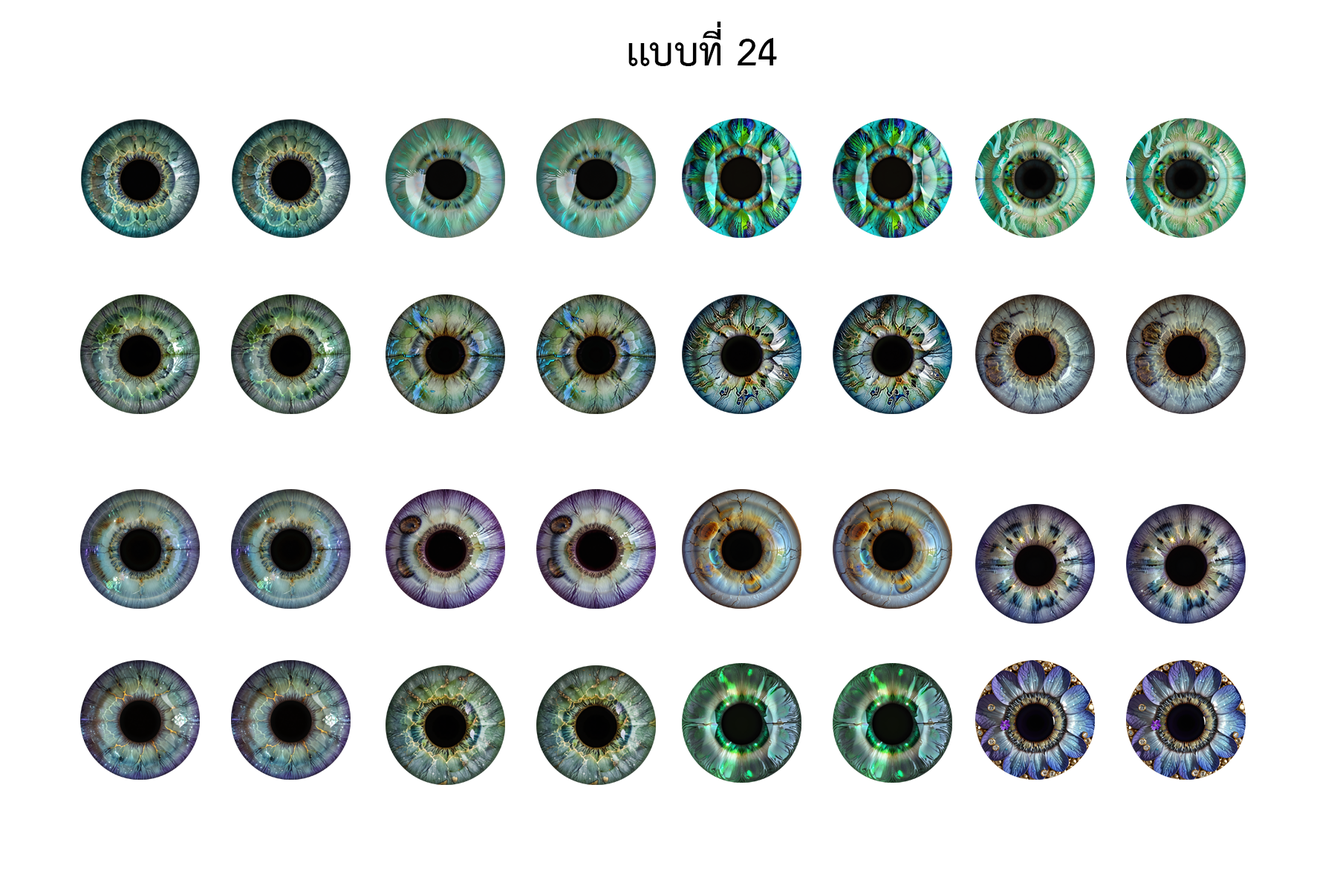
<style>
.page{position:relative;width:1337px;height:892px;background:#ffffff}
.page>*{position:absolute;margin:0}
.t1{font:55.7px "THSarabunPSK-Bold";color:#000000}
</style>
<div class="page">
<p class="t1" style="left:629px;top:22px;width:148px;height:44px">เเบบที่ 24</p>
</div>
